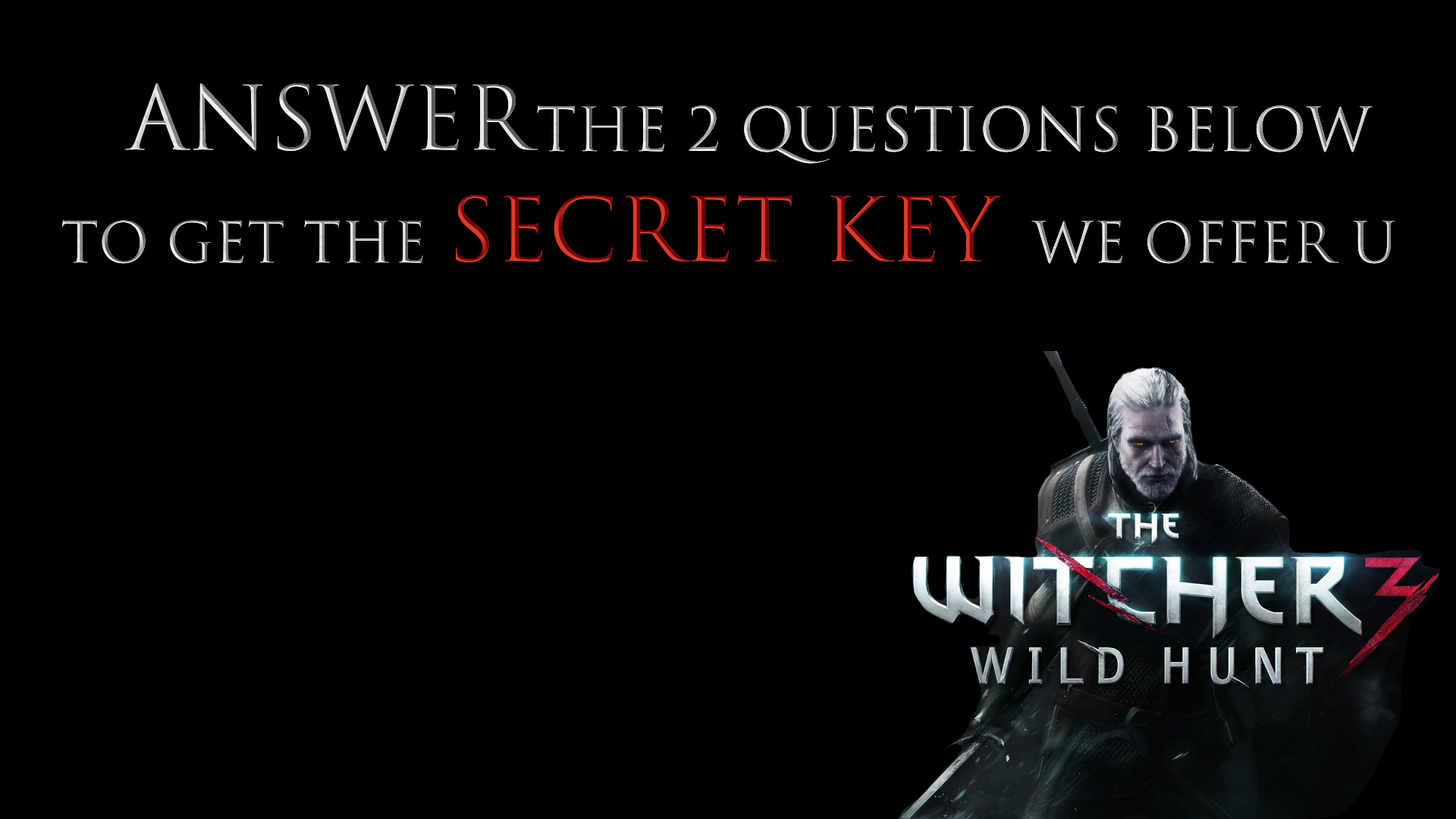
<style>
.page{position:relative;width:1456px;height:819px;background:#000000}
.page>*{position:absolute;margin:0}
.t1{font:85.9px "TrajanColor-Concept"}
.t2{font:58.9px "TrajanColor-Concept"}
.t3{font:54.8px "TrajanColor-Concept"}
</style>
<div class="page">
<p class="t1" style="left:125px;top:83px;width:413px;height:68px">ANSWER</p>
<p class="t2" style="left:537px;top:105px;width:836px;height:59px">THE 2 QUESTIONS BELOW</p>
<p class="t1" style="left:456px;top:194px;width:545px;height:68px">SECRET KEY</p>
<p class="t3" style="left:62px;top:220px;width:1333px;height:44px">TO GET THE                                  WE OFFER U</p>
</div>
